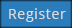
<style>
.page{position:relative;width:72px;height:28px;background:#2b7cba}
.page>*{position:absolute;margin:0}
.t1{font:14px "OpenSans";letter-spacing:0.05em;color:#dadada}
</style>
<div class="page">
<p class="t1" style="left:9px;top:8px;width:57px;height:14px">Register</p>
</div>
